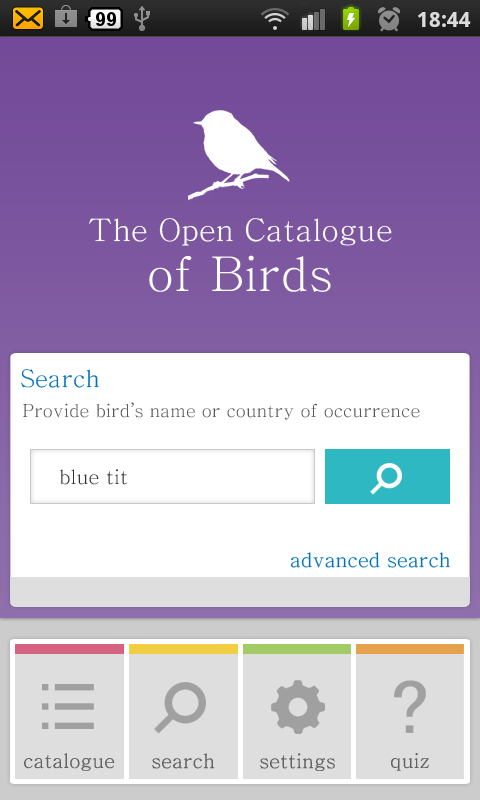
<style>
.page{position:relative;width:480px;height:800px;background:#ffffff}
.page>*{position:absolute;margin:0}
.t1{font:31px/50px "Chrysanthi-Unicode";color:#ffffff}
.t2{font:31px/43px "Chrysanthi-Unicode";color:#ffffff}
.t3{font:48px/50px "Chrysanthi-Unicode";color:#ffffff}
.t4{font:48px/43px "Chrysanthi-Unicode";color:#ffffff}
.t5{font:24px "Chrysanthi-Unicode";color:#0072bc}
.t6{font:18px "Chrysanthi-Unicode";color:#585858}
.t7{font:20px "Chrysanthi-Unicode";color:#353535}
.t8{font:20px "Chrysanthi-Unicode";color:#0072bc}
.t9{font:20px "Chrysanthi-Unicode";color:#636363}
</style>
<div class="page">
<p class="t1" style="left:89px;top:218px;width:303px;height:74px;text-align:center"><span class="t2">The Op</span>en Catalogue<br><span class="t3">of Bird</span><span class="t4">s</span></p>
<p class="t5" style="left:21px;top:369px;width:78px;height:19px">Search</p>
<p class="t6" style="left:23px;top:402px;width:397px;height:18px">Provide bird’s name or country of occurrence</p>
<p class="t7" style="left:60px;top:469px;width:67px;height:16px">blue tit</p>
<p class="t8" style="left:290px;top:552px;width:160px;height:16px">advanced search</p>
<p class="t9" style="left:24px;top:753px;width:91px;height:18px">catalogue</p>
<p class="t9" style="left:152px;top:753px;width:63px;height:16px">search</p>
<p class="t9" style="left:260px;top:753px;width:75px;height:18px">settings</p>
<p class="t9" style="left:391px;top:753px;width:38px;height:18px">quiz</p>
</div>
